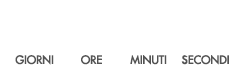
<style>
.page{position:relative;width:245px;height:76px;background:#ffffff}
.page>*{position:absolute;margin:0}
.t1{font:11px "FuturaStd-Medium";letter-spacing:-0.01em;color:#535353;font-weight:bold}
</style>
<div class="page">
<p class="t1" style="left:15px;top:55px;width:39px;height:10px">GIORNI</p>
<p class="t1" style="left:81px;top:55px;width:21px;height:10px">ORE</p>
<p class="t1" style="left:130px;top:55px;width:37px;height:10px">MINUTI</p>
<p class="t1" style="left:181px;top:55px;width:48px;height:10px">SECONDI</p>
</div>
